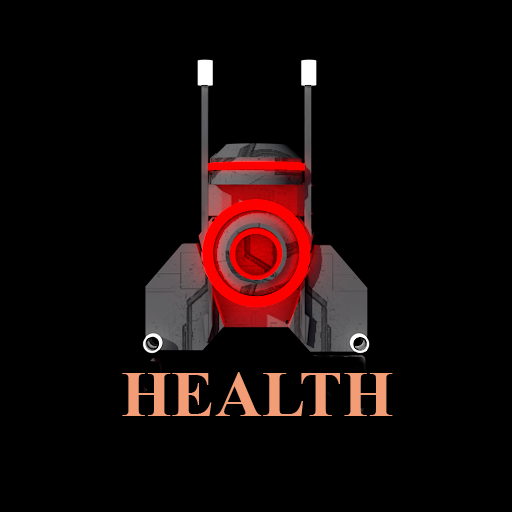
<style>
.page{position:relative;width:512px;height:512px;background:#000000}
.page>*{position:absolute;margin:0}
.t1{font:65px "TimesNewRomanPS-BoldMT";color:#f39d77}
</style>
<div class="page">
<p class="t1" style="left:122px;top:372px;width:271px;height:44px">HEALTH</p>
</div>
